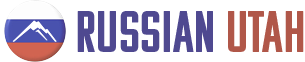
<style>
.page{position:relative;width:305px;height:62px;background:#ffffff}
.page>*{position:absolute;margin:0}
.t1{font:58.3px "KomuA";color:#4b4495}
.t2{font:58.3px "KomuA";color:#b85242}
</style>
<div class="page">
<p class="t1" style="left:77px;top:11px;width:227px;height:41px">RUSSIAN<span class="t2"> UTAH</span></p>
</div>
